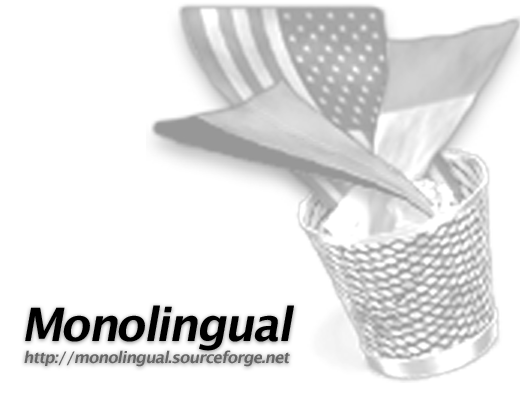
<style>
.page{position:relative;width:520px;height:400px;background:#ffffff}
.page>*{position:absolute;margin:0}
.t1{font:46px "LucidaGrande-Bold";letter-spacing:-0.05em;color:#000000;font-style:italic}
.t2{font:16px "LucidaGrande-Bold";letter-spacing:-0.05em;color:#666666;font-style:italic}
</style>
<div class="page">
<p class="t1" style="left:25px;top:305px;width:269px;height:46px">Monolingual</p>
<p class="t2" style="left:24px;top:350px;width:266px;height:17px">http://monolingual.sourceforge.net</p>
</div>
